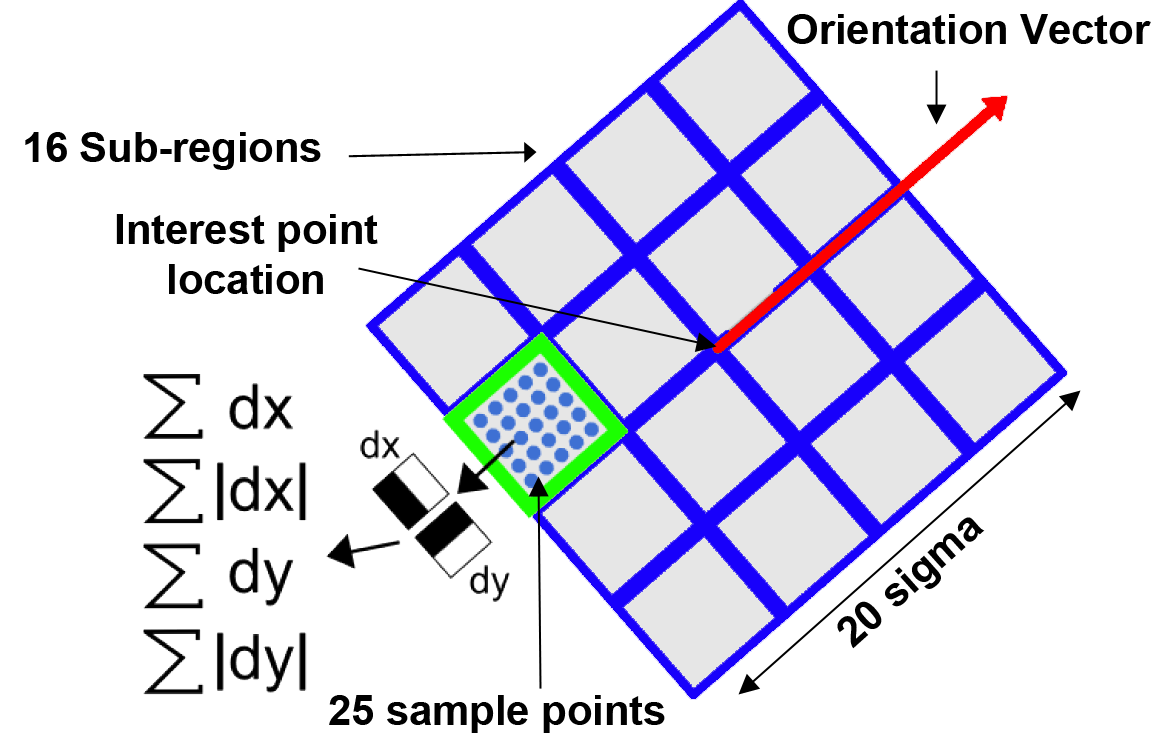
<style>
.page{position:relative;width:1162px;height:742px;background:#ffffff}
.page>*{position:absolute;margin:0}
.t1{font:41.7px "Arial-BoldMT";color:#000000}
</style>
<div class="page">
<p class="t1" style="left:787px;top:14px;width:364px;height:30px">Orientation Vector</p>
<p class="t1" style="left:25px;top:132px;width:296px;height:38px">16 Sub-regions</p>
<p class="t1" style="left:116px;top:214px;width:262px;height:80px;text-align:center">Interest point<br>location</p>
<p class="t1" style="left:837px;top:517px;width:148px;height:132px;rotate:-42deg">20 sigma</p>
<p class="t1" style="left:329px;top:695px;width:336px;height:38px">25 sample points</p>
</div>
